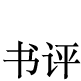
<style>
.page{position:relative;width:81px;height:81px;background:#ffffff}
.page>*{position:absolute;margin:0}
.t1{font:40px "STSongti-SC-Regular";color:#000000}
</style>
<div class="page">
<p class="t1" style="left:3px;top:40px;width:78px;height:40px">书评</p>
</div>
